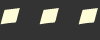
<style>
.page{position:relative;width:100px;height:40px;background:#333333}
.page>*{position:absolute;margin:0}
.t1{font:84.4px "Adventure";letter-spacing:-0.05em;color:#fefdd7}
</style>
<div class="page">
<p class="t1" style="left:0px;top:8px;width:98px;height:17px">. . .</p>
</div>
